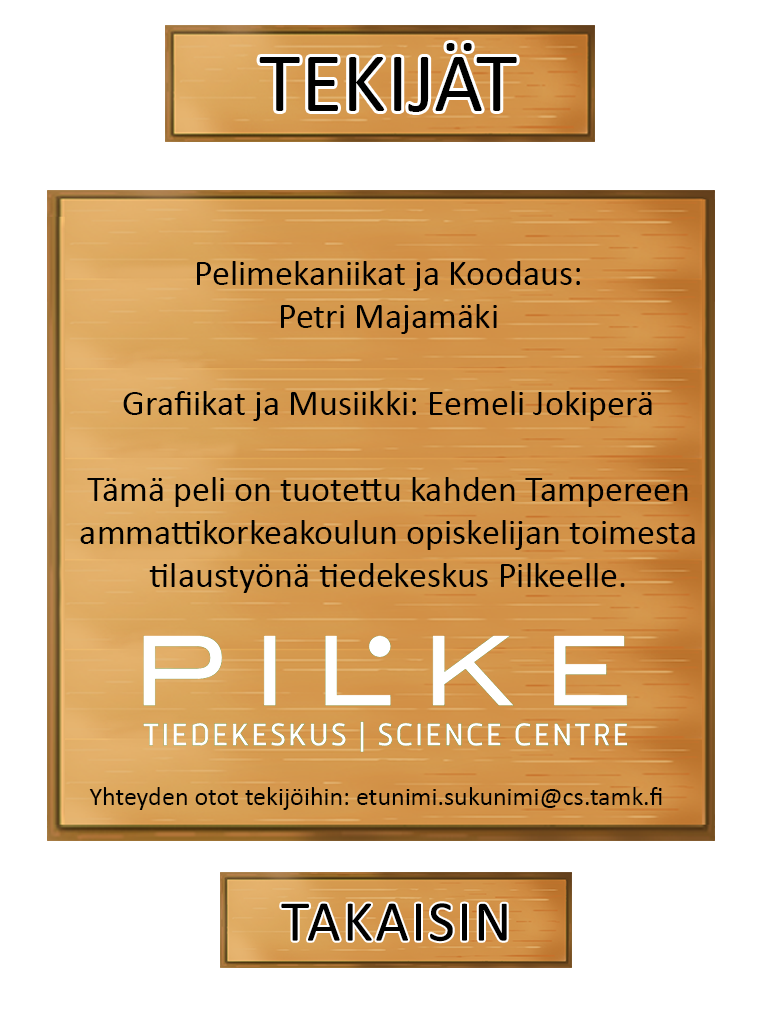
<style>
.page{position:relative;width:768px;height:1024px;background:#ffffff}
.page>*{position:absolute;margin:0}
.t1{font:85px "Calibri";color:#000000}
.t2{font:36px "Calibri";color:#000000}
.t3{font:26px "Calibri";color:#000000}
</style>
<div class="page">
<p class="t1" style="left:259px;top:43px;width:258px;height:69px">TEKIJÄT</p>
<p class="t2" style="left:80px;top:261px;width:615px;height:332px;text-align:center">Pelimekaniikat ja Koodaus:  <br>Petri Majamäki<br><br>Grafiikat ja Musiikki: Eemeli Jokiperä<br><br>Tämä peli on tuotettu kahden Tampereen <br>ammattikorkeakoulun opiskelijan toimesta tilaustyönä tiedekeskus Pilkeelle.</p>
<p class="t3" style="left:89px;top:787px;width:573px;height:23px">Yhteyden otot tekijöihin: etunimi.sukunimi@cs.tamk.fi</p>
</div>
